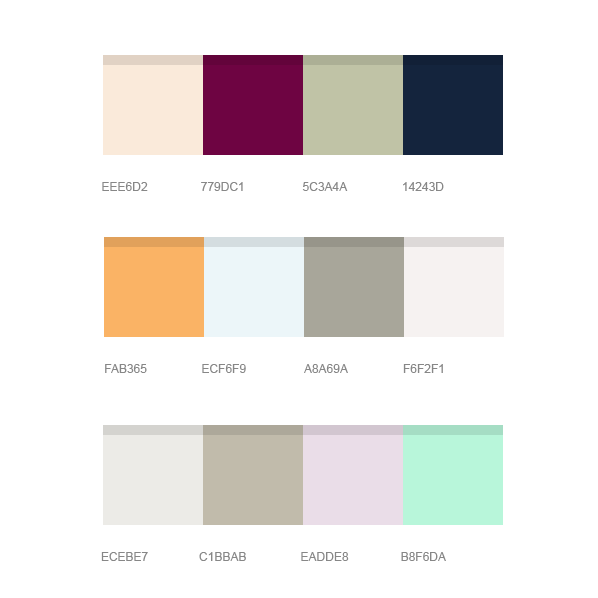
<style>
.page{position:relative;width:598px;height:598px;background:#ffffff}
.page>*{position:absolute;margin:0}
.t1{font:12px "ArialMT";color:#878787;text-transform:uppercase}
</style>
<div class="page">
<p class="t1" style="left:102px;top:182px;width:46px;height:9px">EEE6d2</p>
<p class="t1" style="left:201px;top:182px;width:42px;height:9px">779dc1</p>
<p class="t1" style="left:302px;top:182px;width:46px;height:9px">5c3a4a</p>
<p class="t1" style="left:403px;top:182px;width:41px;height:9px">14243d</p>
<p class="t1" style="left:105px;top:364px;width:42px;height:9px">FAB365</p>
<p class="t1" style="left:202px;top:364px;width:44px;height:9px">ECF6F9</p>
<p class="t1" style="left:304px;top:364px;width:44px;height:9px">A8A69A</p>
<p class="t1" style="left:403px;top:364px;width:40px;height:9px">F6F2F1</p>
<p class="t1" style="left:101px;top:552px;width:47px;height:9px">ECEBE7</p>
<p class="t1" style="left:199px;top:552px;width:47px;height:9px">C1BBAB</p>
<p class="t1" style="left:301px;top:552px;width:48px;height:9px">EADDE8</p>
<p class="t1" style="left:401px;top:552px;width:45px;height:9px">B8F6DA</p>
</div>
